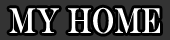
<style>
.page{position:relative;width:170px;height:40px;background:#333333}
.page>*{position:absolute;margin:0}
.t1{font:36px "EngraversMT";color:#ffffff;scale:0.67 1}
</style>
<div class="page">
<p class="t1" style="left:9px;top:7px;width:151px;height:27px">MY Home</p>
</div>
